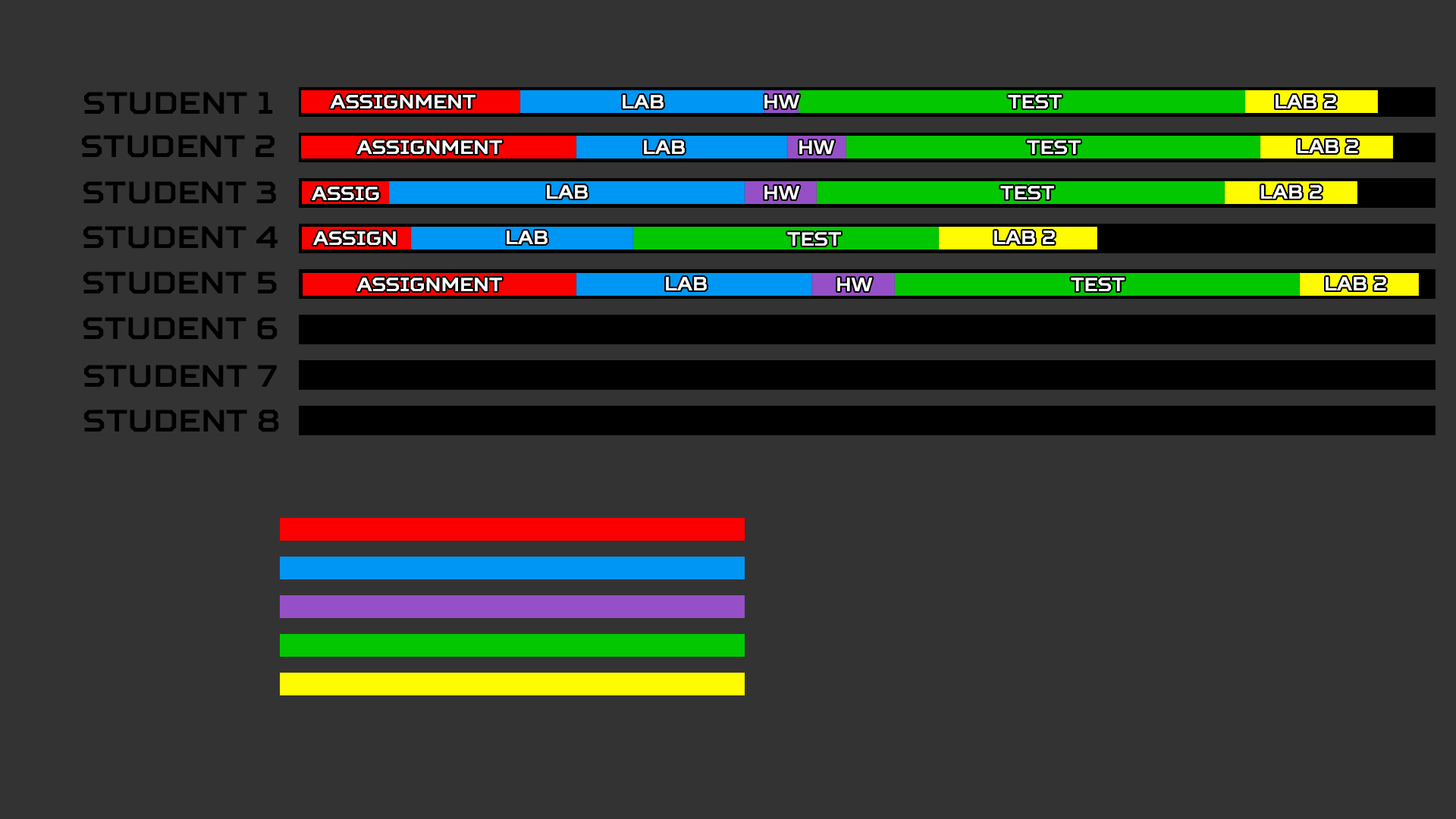
<style>
.page{position:relative;width:1456px;height:819px;background:#333333}
.page>*{position:absolute;margin:0}
.t1{font:30.8px "SquaresBold";color:#000000}
.t2{font:19px "SquaresBold";color:#ffffff}
</style>
<div class="page">
<p class="t1" style="left:84px;top:92px;width:189px;height:23px">Student 1</p>
<p class="t2" style="left:330px;top:95px;width:145px;height:13px">Assignment</p>
<p class="t2" style="left:623px;top:95px;width:41px;height:13px">lab</p>
<p class="t2" style="left:764px;top:95px;width:36px;height:13px">HW</p>
<p class="t2" style="left:1008px;top:95px;width:54px;height:13px">test</p>
<p class="t2" style="left:1275px;top:95px;width:61px;height:13px">lab 2</p>
<p class="t1" style="left:82px;top:135px;width:193px;height:23px">Student 2</p>
<p class="t2" style="left:356px;top:140px;width:146px;height:14px">Assignment</p>
<p class="t2" style="left:644px;top:140px;width:41px;height:14px">lab</p>
<p class="t2" style="left:799px;top:140px;width:36px;height:14px">HW</p>
<p class="t2" style="left:1027px;top:140px;width:54px;height:14px">test</p>
<p class="t2" style="left:1297px;top:140px;width:61px;height:13px">lab 2</p>
<p class="t1" style="left:83px;top:181px;width:193px;height:23px">Student 3</p>
<p class="t2" style="left:547px;top:185px;width:41px;height:14px">lab</p>
<p class="t2" style="left:764px;top:186px;width:36px;height:13px">HW</p>
<p class="t2" style="left:1000px;top:186px;width:54px;height:13px">test</p>
<p class="t2" style="left:1261px;top:185px;width:61px;height:14px">lab 2</p>
<p class="t2" style="left:312px;top:187px;width:67px;height:13px">Assig</p>
<p class="t1" style="left:83px;top:226px;width:195px;height:23px">Student 4</p>
<p class="t2" style="left:313px;top:231px;width:83px;height:14px">Assign</p>
<p class="t2" style="left:507px;top:231px;width:41px;height:13px">lab</p>
<p class="t2" style="left:787px;top:232px;width:54px;height:14px">test</p>
<p class="t2" style="left:994px;top:231px;width:61px;height:13px">lab 2</p>
<p class="t1" style="left:83px;top:271px;width:194px;height:23px">Student 5</p>
<p class="t2" style="left:356px;top:278px;width:146px;height:13px">Assignment</p>
<p class="t2" style="left:666px;top:277px;width:41px;height:13px">lab</p>
<p class="t2" style="left:837px;top:278px;width:36px;height:13px">HW</p>
<p class="t2" style="left:1071px;top:278px;width:54px;height:13px">test</p>
<p class="t2" style="left:1326px;top:277px;width:60px;height:13px">lab 2</p>
<p class="t1" style="left:83px;top:317px;width:195px;height:23px">Student 6</p>
<p class="t1" style="left:84px;top:365px;width:193px;height:23px">Student 7</p>
<p class="t1" style="left:84px;top:409px;width:195px;height:23px">Student 8</p>
</div>
